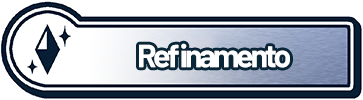
<style>
.page{position:relative;width:363px;height:100px;background:#ffffff}
.page>*{position:absolute;margin:0}
.t1{font:32px "Barlow-Bold";letter-spacing:-0.1em;color:#ffffff}
</style>
<div class="page">
<p class="t1" style="left:139px;top:43px;width:151px;height:25px">Refinamento</p>
</div>
